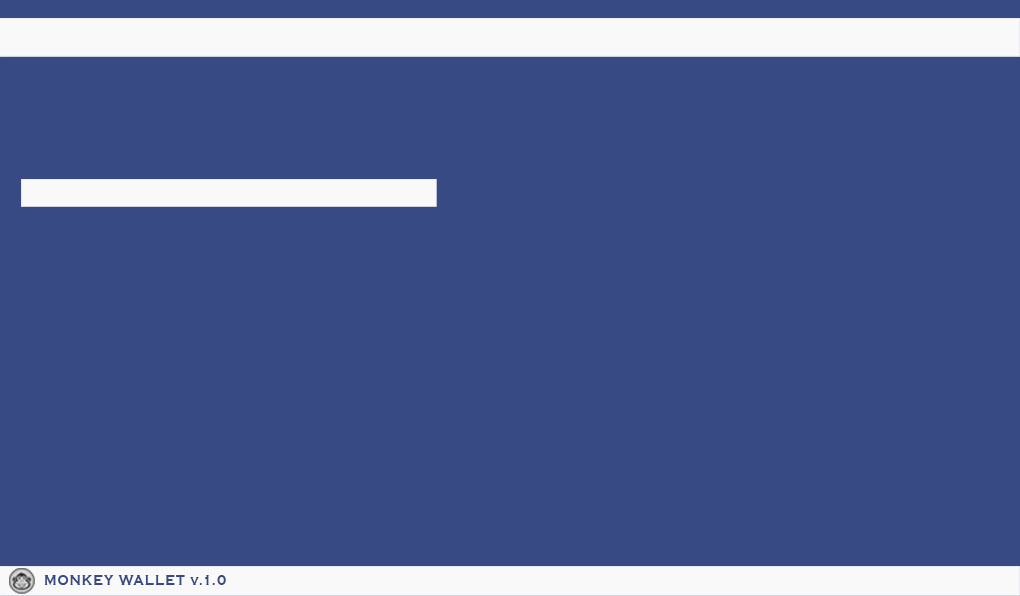
<style>
.page{position:relative;width:1020px;height:596px;background:#374a83}
.page>*{position:absolute;margin:0}
.t1{font:14px "CopperplateGothic-Bold";letter-spacing:0.1em;color:#374a83;scale:0.9 1}
</style>
<div class="page">
<p class="t1" style="left:44px;top:575px;width:182px;height:10px">MONKEY WALLET v.1.0</p>
</div>
